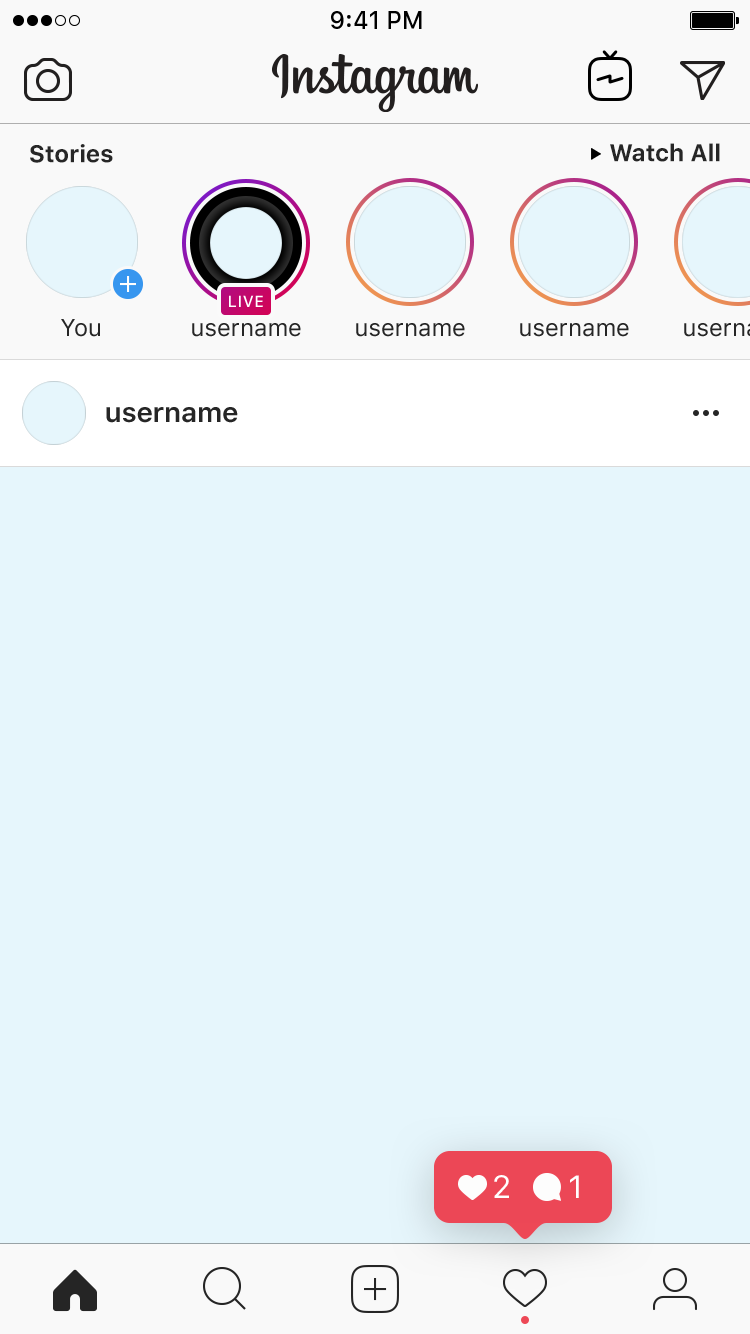
<style>
.page{position:relative;width:750px;height:1334px;background:#e6f6fc}
.page>*{position:absolute;margin:0}
.t1{font:24px "SFUIText-Bold";letter-spacing:-0.01em;color:#262626}
.t2{font:16px "SFUIText-Medium";letter-spacing:0.042em;color:#ffffff}
.t3{font:24px "SFUIText-Regular";color:#262626}
.t4{font:28px "SFUIText-Semibold";letter-spacing:-0.011em;color:#262626}
.t5{font:32px "SFUIText-Regular";letter-spacing:-0.011em;color:#ffffff}
</style>
<div class="page">
<p class="t1" style="left:30px;top:144px;width:83px;height:19px">Stories</p>
<p class="t1" style="left:610px;top:143px;width:110px;height:19px">Watch All</p>
<p class="t2" style="left:229px;top:295px;width:34px;height:12px">LIVE</p>
<p class="t3" style="left:61px;top:319px;width:39px;height:18px">You</p>
<p class="t3" style="left:192px;top:323px;width:109px;height:14px">username</p>
<p class="t3" style="left:356px;top:323px;width:109px;height:14px">username</p>
<p class="t3" style="left:520px;top:323px;width:109px;height:14px">username</p>
<p class="t4" style="left:106px;top:407px;width:132px;height:16px">username</p>
<p class="t5" style="left:494px;top:1175px;width:15px;height:23px">2</p>
<p class="t5" style="left:570px;top:1175px;width:9px;height:23px">1</p>
</div>
